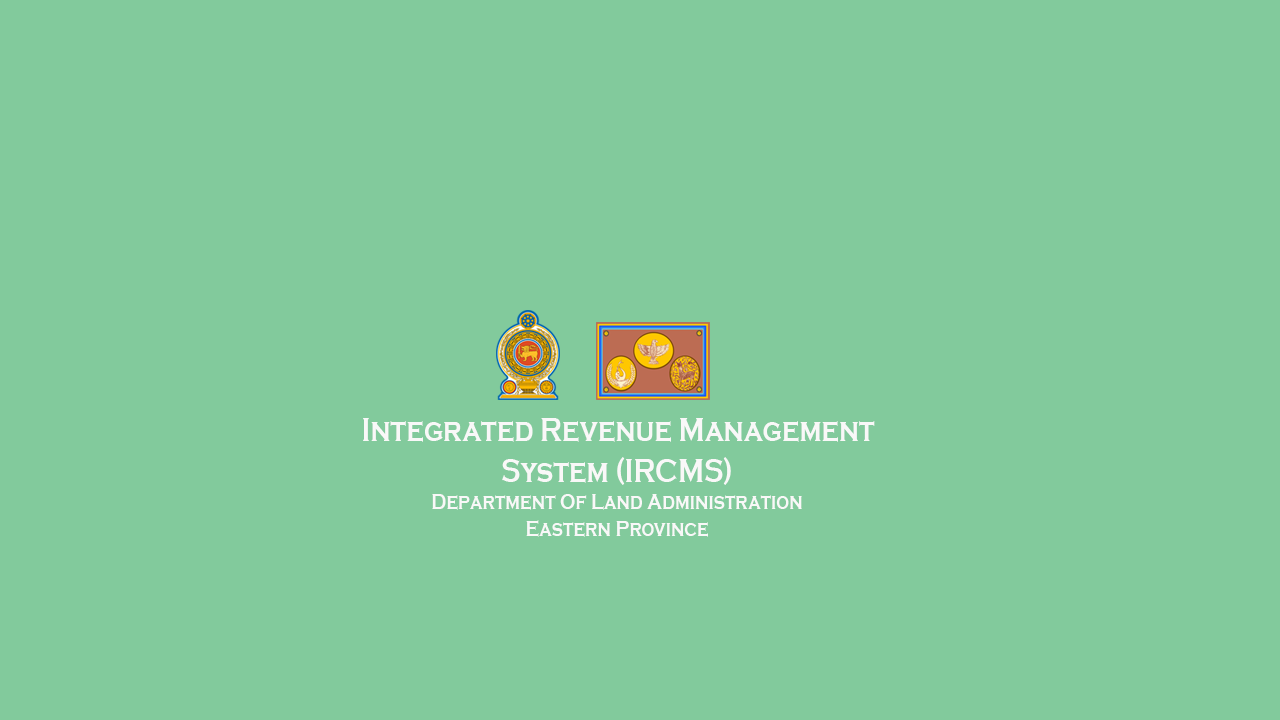
<style>
.page{position:relative;width:1280px;height:720px;background:#82ca9c}
.page>*{position:absolute;margin:0}
.t1{font:22.7px "CopperplateGothic-Bold";color:#f9f8f8;scale:0.8 1}
.t2{font:11.3px "CopperplateGothic-Bold";color:#000000;scale:0.8 1}
.t3{font:34px "CopperplateGothic-Bold";color:#f9f8f8;scale:0.8 1}
</style>
<div class="page">
<p class="t1" style="left:363px;top:418px;width:512px;height:119px;text-align:center"><span class="t2"> </span><span class="t3">Integrated Revenue Management System (IRCMS)<br></span>Department Of Land Administration<br>Eastern Province</p>
</div>
